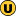
<style>
.page{position:relative;width:16px;height:16px;background:#ffcc33}
.page>*{position:absolute;margin:0}
.t1{font:12px "Arial-Black";color:#000000}
</style>
<div class="page">
<p class="t1" style="left:4px;top:4px;width:8px;height:9px">U</p>
</div>
